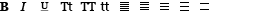
<style>
.page{position:relative;width:280px;height:14px;background:#ffffff}
.page>*{position:absolute;margin:0}
.t1{font:12px "Georgia-Bold";color:#000000}
.t2{font:12px "Georgia-Italic";color:#000000}
.t3{font:9.7px "Georgia";color:#000000;text-decoration:underline}
.t4{font:12px "Georgia";color:#000000}
</style>
<div class="page">
<p class="t1" style="left:0px;top:2px;width:9px;height:9px">B</p>
<p class="t2" style="left:20px;top:2px;width:7px;height:9px">I</p>
<p class="t3" style="left:40px;top:2px;width:9px;height:9px">U</p>
<p class="t4" style="left:60px;top:2px;width:13px;height:9px">Tt</p>
<p class="t4" style="left:80px;top:2px;width:16px;height:9px">TT</p>
<p class="t4" style="left:100px;top:2px;width:10px;height:9px">tt</p>
</div>
